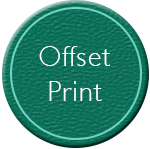
<style>
.page{position:relative;width:150px;height:149px;background:#ffffff}
.page>*{position:absolute;margin:0}
.t1{font:28.7px/34.5px "Humanist521BT-Light";letter-spacing:0.045em;color:#ffffff}
</style>
<div class="page">
<p class="t1" style="left:39px;top:46px;width:71px;height:55px;text-align:center">Offset<br>Print</p>
</div>
